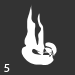
<style>
.page{position:relative;width:75px;height:75px;background:#333333}
.page>*{position:absolute;margin:0}
.t1{font:12px "MyriadPro-Regular";color:#ffffff}
</style>
<div class="page">
<p class="t1" style="left:4px;top:64px;width:6px;height:8px">5</p>
</div>
